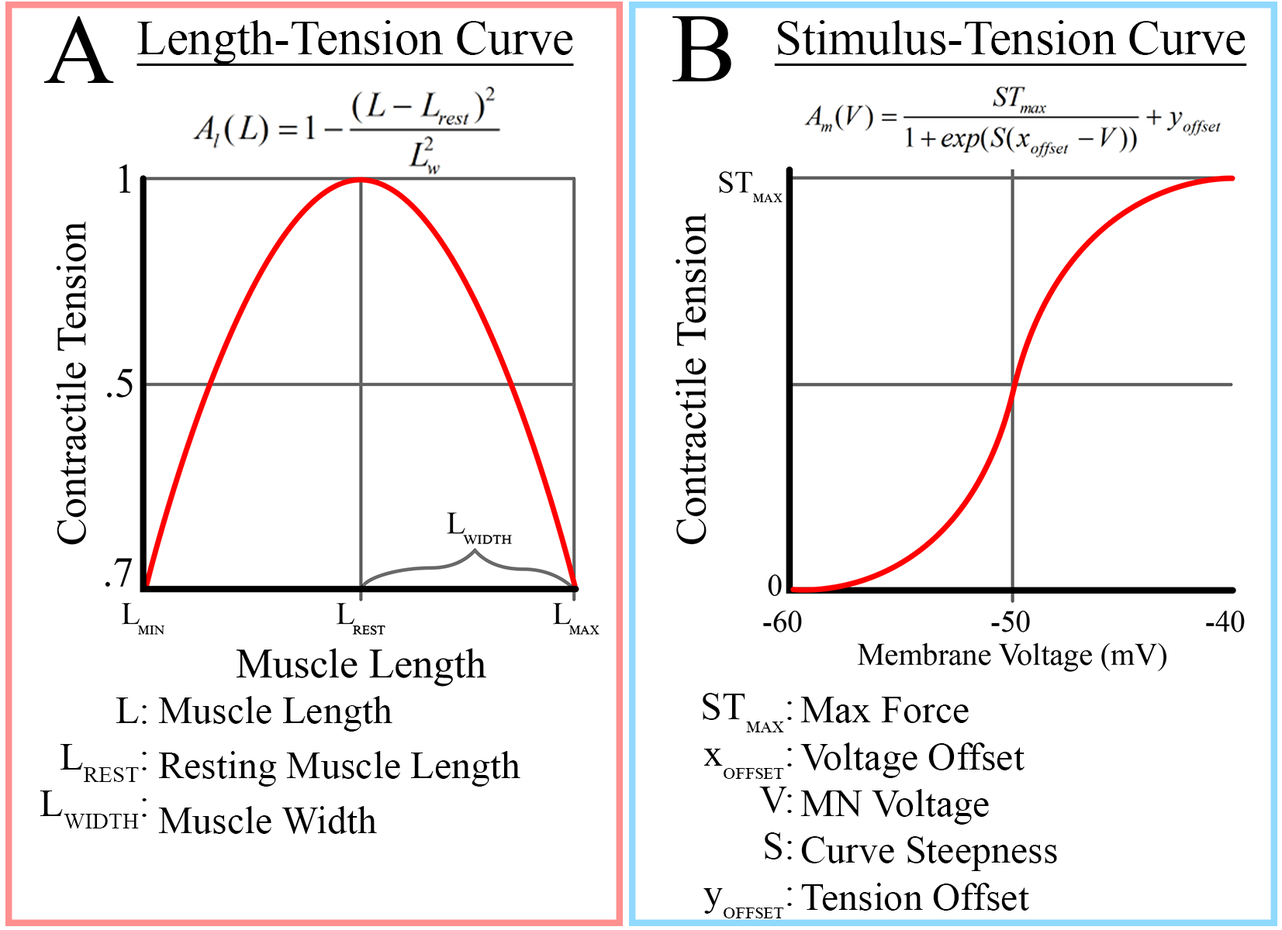
<style>
.page{position:relative;width:1282px;height:930px;background:#ffffff}
.page>*{position:absolute;margin:0}
.t1{font:98.5px "TimesNewRomanPSMT";color:#000000}
.t2{font:48.5px "TimesNewRomanPSMT";color:#000000;text-decoration:underline}
.t3{font:38.8px "TimesNewRomanPSMT";color:#000000}
.t4{font:38.8px/54.9px "TimesNewRomanPSMT";color:#000000}
.t5{font:38.8px "TimesNewRomanPSMT";color:#000000;font-variant:small-caps}
.t6{font:38.8px/46.8px "TimesNewRomanPSMT";color:#000000}
</style>
<div class="page">
<p class="t1" style="left:44px;top:16px;width:70px;height:67px">A</p>
<p class="t1" style="left:672px;top:16px;width:59px;height:65px">B</p>
<p class="t2" style="left:136px;top:20px;width:438px;height:46px">Length-Tension Curve</p>
<p class="t2" style="left:774px;top:20px;width:473px;height:46px">Stimulus-Tension Curve</p>
<p class="t3" style="left:40px;top:698px;width:107px;height:131px;text-align:right">L:<br>LREST:<br>LWIDTH:</p>
<p class="t4" style="left:158px;top:696px;width:362px;height:138px">Muscle Length<br>Resting Muscle Length<br>Muscle Width</p>
<p class="t3" style="left:702px;top:693px;width:90px;height:226px;text-align:right">ST<span class="t5">max</span>:<br>x<span class="t5">offset</span>:<br>V:<br>S:<br>y<span class="t5">offset</span>:</p>
<p class="t6" style="left:800px;top:697px;width:257px;height:214px">Max Force<br>Voltage Offset<br>MN Voltage<br>Curve Steepness<br>Tension Offset</p>
</div>
